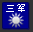
<style>
.page{position:relative;width:33px;height:32px;background:#000090}
.page>*{position:absolute;margin:0}
.t1{font:10.4px "SimSun";color:#ffffff}
</style>
<div class="page">
<p class="t1" style="left:6px;top:4px;width:19px;height:8px">三军</p>
</div>
